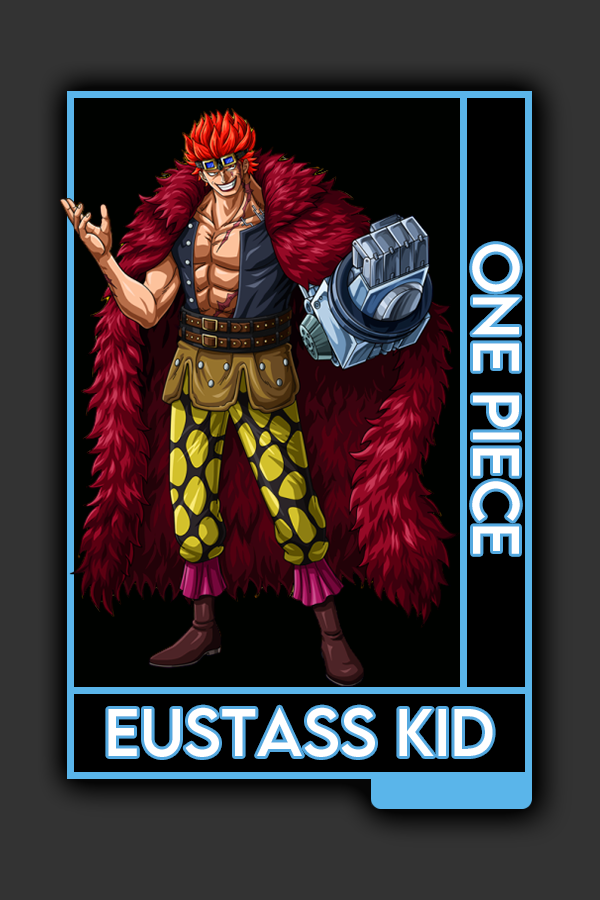
<style>
.page{position:relative;width:600px;height:900px;background:#333333}
.page>*{position:absolute;margin:0}
.t1{font:58.4px "LEMONMILK-Regular";color:#ffffff}
.t2{font:60.3px "LEMONMILK-Regular";color:#ffffff}
</style>
<div class="page">
<p class="t1" style="left:472px;top:244px;width:48px;height:310px;rotate:90deg">One Piece</p>
<p class="t2" style="left:108px;top:707px;width:385px;height:50px">Eustass Kid</p>
</div>
